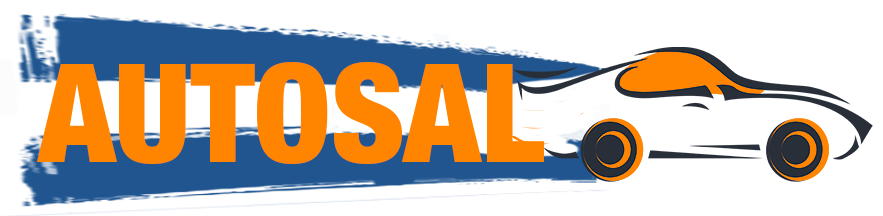
<style>
.page{position:relative;width:883px;height:216px;background:#ffffff}
.page>*{position:absolute;margin:0}
.t1{font:137.1px "HelveticaNeue-BlackCond";color:#ff8400}
</style>
<div class="page">
<p class="t1" style="left:37px;top:61px;width:507px;height:103px">AUTOSAL</p>
</div>
